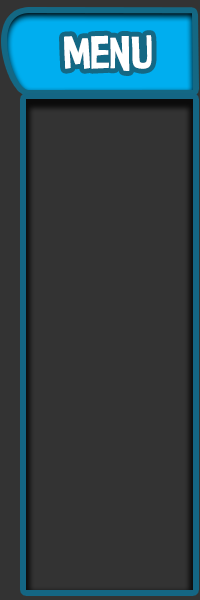
<style>
.page{position:relative;width:200px;height:600px;background:#333333}
.page>*{position:absolute;margin:0}
.t1{font:47px "InsideOut";color:#ffffff}
</style>
<div class="page">
<p class="t1" style="left:64px;top:35px;width:88px;height:36px">menu</p>
</div>
